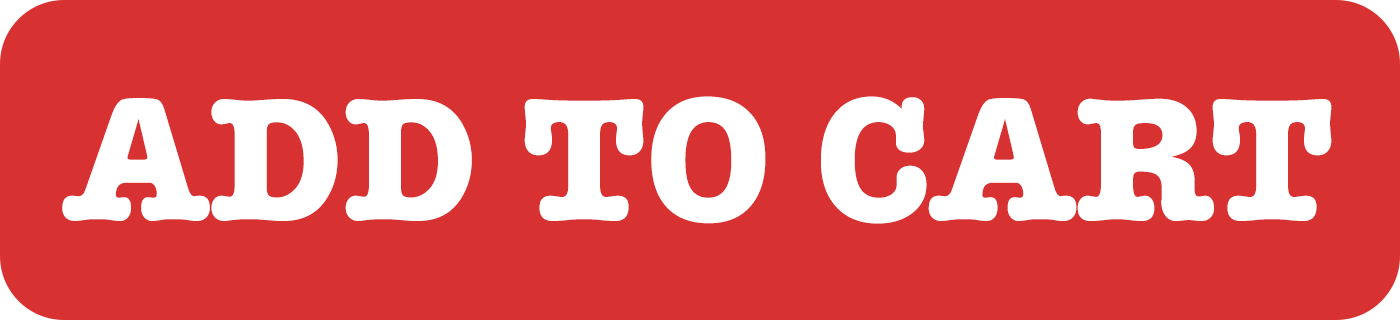
<style>
.page{position:relative;width:1400px;height:320px;background:#d83131}
.page>*{position:absolute;margin:0}
.t1{font:180px "AmericanTypewriter-Bold";color:#ffffff}
</style>
<div class="page">
<p class="t1" style="left:62px;top:96px;width:1270px;height:128px">ADD TO CART</p>
</div>
